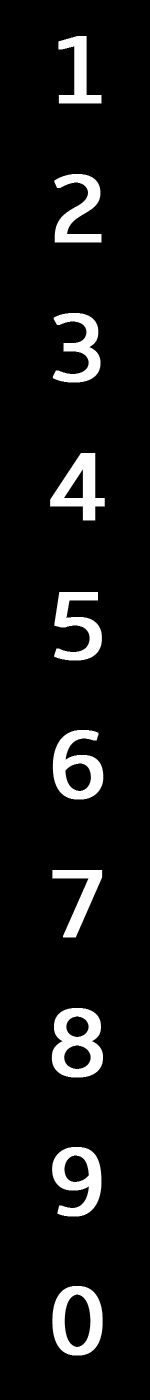
<style>
.page{position:relative;width:150px;height:1400px;background:#000000}
.page>*{position:absolute;margin:0}
.t1{font:100px/139px "Amble-Regular";letter-spacing:0.1em;color:#ffffff;font-weight:bold}
</style>
<div class="page">
<p class="t1" style="left:50px;top:36px;width:55px;height:1320px">1<br>2<br>3<br>4<br>5<br>6<br>7<br>8<br>9<br>0</p>
</div>
